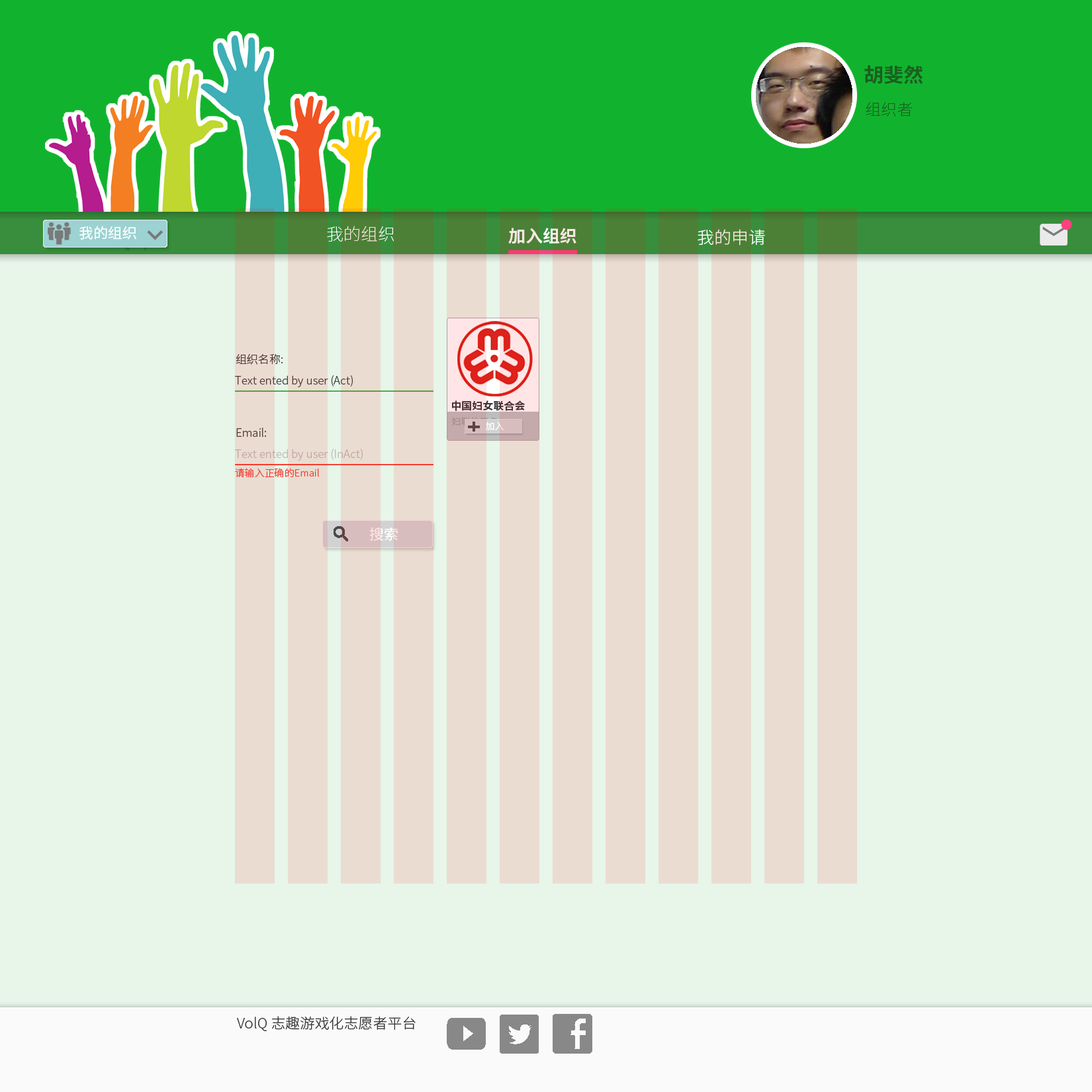
<style>
.page{position:relative;width:1092px;height:1092px;background:#e8f5e9}
.page>*{position:absolute;margin:0}
.t1{font:19.5px "NotoSansCJKsc-Bold";color:#1b5e20}
.t2{font:15.6px "NotoSansCJKsc-Thin";color:#1b5e20}
.t3{font:14.3px "NotoSansCJKsc-Regular";color:#ffffff}
.t4{font:16.9px "NotoSansCJKsc-Thin"}
.t5{font:16.9px "NotoSansCJKsc-Bold";color:#ffe5e5}
.t6{font:16.9px "NotoSansCJKsc-Light"}
.t7{font:11px "NotoSansCJKsc-Light";color:#414141}
.t8{font:11px "NotoSansCJKsc-Light";color:#bababa}
.t9{font:9.7px "NotoSansCJKsc-Light";color:#f44336}
.t10{font:14.3px "NotoSansCJKsc-Light";color:#353535}
</style>
<div class="page">
<p class="t1" style="left:864px;top:65px;width:59px;height:19px">胡斐然</p>
<p class="t2" style="left:866px;top:102px;width:47px;height:14px">组织者</p>
<p class="t3" style="left:79px;top:226px;width:57px;height:14px">我的组织</p>
<p class="t4" style="left:327px;top:226px;width:67px;height:16px">我的组织</p>
<p class="t5" style="left:508px;top:228px;width:68px;height:16px">加入组织</p>
<p class="t6" style="left:698px;top:229px;width:67px;height:17px">我的申请</p>
<p class="t7" style="left:236px;top:353px;width:47px;height:12px">组织名称:</p>
<p class="t7" style="left:235px;top:375px;width:118px;height:12px">Text ented by user (Act)</p>
<p class="t7" style="left:236px;top:428px;width:30px;height:9px">Email:</p>
<p class="t8" style="left:235px;top:449px;width:128px;height:12px">Text ented by user (InAct)</p>
<p class="t9" style="left:235px;top:468px;width:84px;height:10px">请输入正确的Email</p>
<p class="t10" style="left:237px;top:1016px;width:179px;height:15px">VolQ 志趣游戏化志愿者平台</p>
</div>
